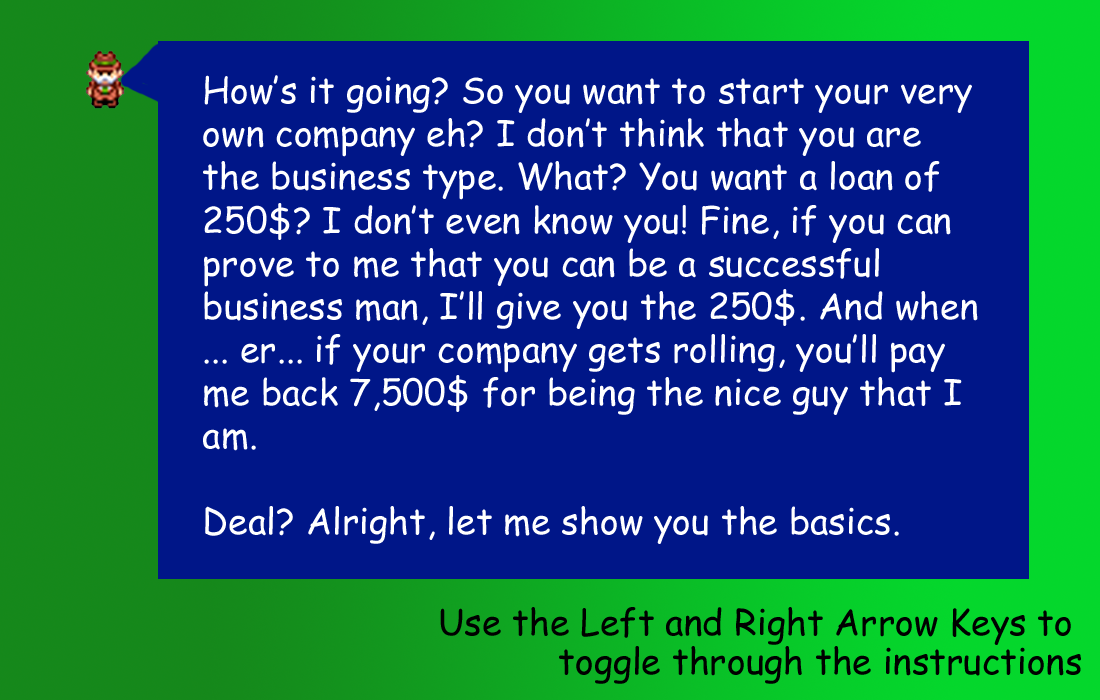
<style>
.page{position:relative;width:1100px;height:700px;background:#001688}
.page>*{position:absolute;margin:0}
.t1{font:35.9px "ComicSansMS";color:#ffffff}
</style>
<div class="page">
<p class="t1" style="left:203px;top:75px;width:775px;height:469px">How’s it going? So you want to start your very own company eh? I don’t think that you are the business type. What? You want a loan of 250$? I don’t even know you! Fine, if you can prove to me that you can be a successful business man, I’ll give you the 250$. And when ... er... if your company gets rolling, you’ll pay me back 7,500$ for being the nice guy that I am.<br><br>Deal? Alright, let me show you the basics.</p>
</div>
